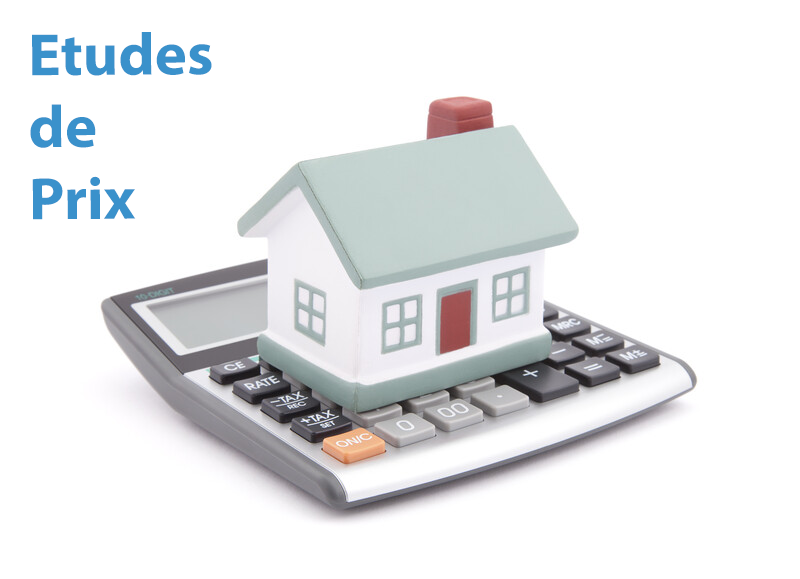
<style>
.page{position:relative;width:800px;height:579px;background:#ffffff}
.page>*{position:absolute;margin:0}
.t1{font:60px "MyriadPro-Bold";color:#3a91cb}
</style>
<div class="page">
<p class="t1" style="left:30px;top:32px;width:182px;height:188px">Etudes <br>de <br>Prix</p>
</div>
